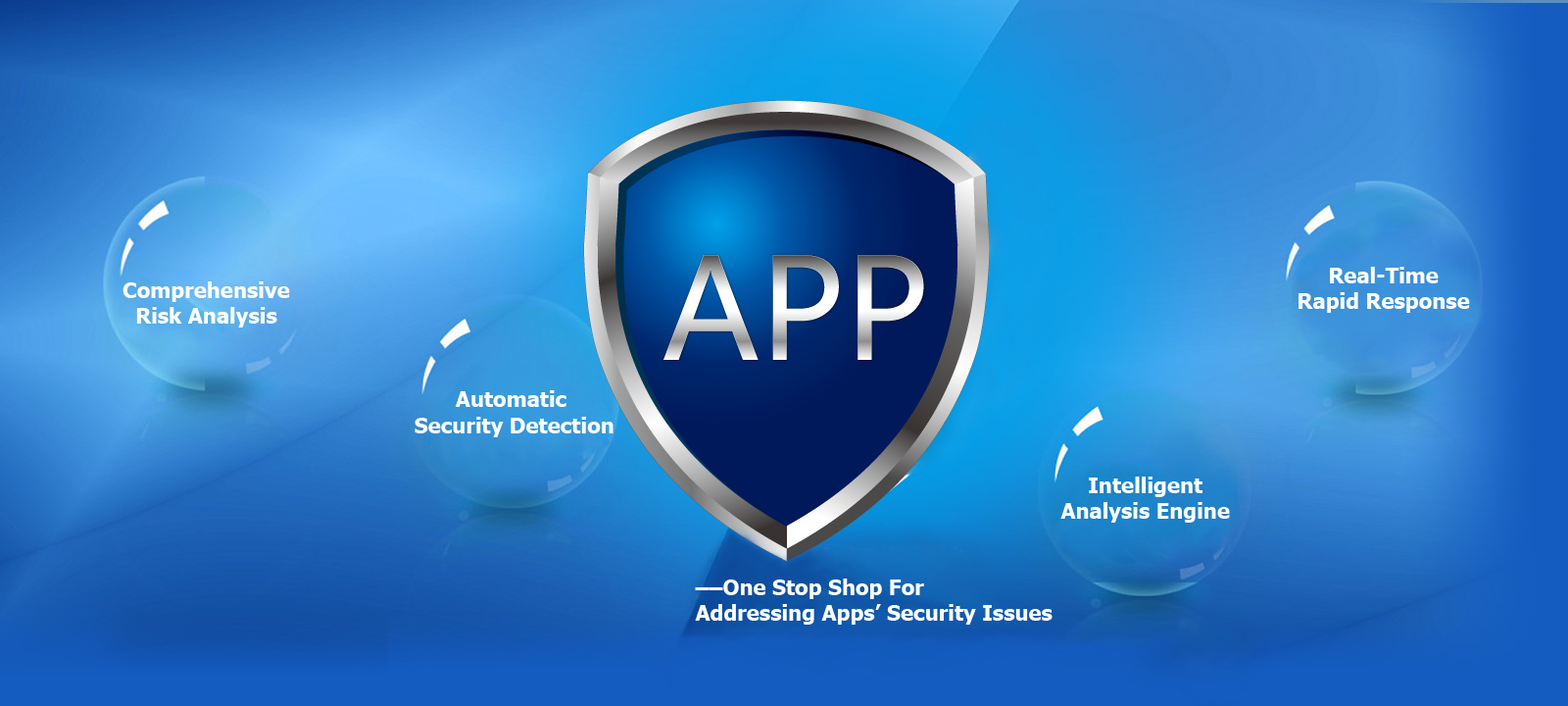
<style>
.page{position:relative;width:1568px;height:706px}
.page>*{position:absolute;margin:0}
.t1{font:21.6px "Tahoma-Bold";color:#ffffff}
</style>
<div class="page">
<p class="t1" style="left:1298px;top:267px;width:172px;height:46px;text-align:center">Real-Time<br>Rapid Response</p>
<p class="t1" style="left:122px;top:281px;width:168px;height:46px;text-align:center">Comprehensive<br>Risk Analysis</p>
<p class="t1" style="left:415px;top:390px;width:198px;height:47px;text-align:center">Automatic <br>Security Detection</p>
<p class="t1" style="left:1060px;top:476px;width:170px;height:46px;text-align:center">Intelligent<br>Analysis Engine</p>
<p class="t1" style="left:695px;top:578px;width:358px;height:46px">––One Stop Shop For <br>Addressing Apps’ Security Issues</p>
</div>
